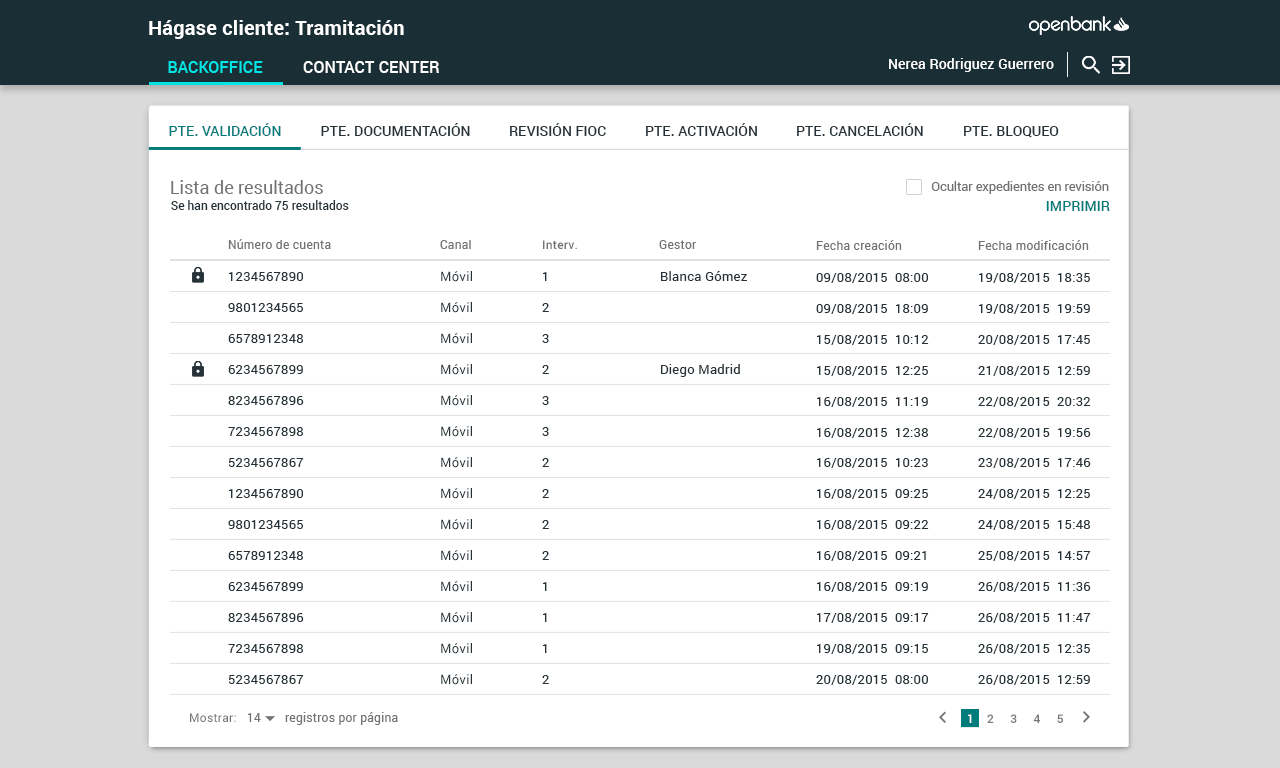
<style>
.page{position:relative;width:1280px;height:768px;background:#ffffff}
.page>*{position:absolute;margin:0}
.t1{font:20px "Roboto-Bold";letter-spacing:0.01em;color:#ffffff}
.t2{font:16px "Roboto-Medium";letter-spacing:0.01em;color:#00e6e6}
.t3{font:16px "Roboto-Medium";letter-spacing:0.01em;color:#ffffff}
.t4{font:14px "Roboto-Medium";letter-spacing:0.01em;color:#ffffff}
.t5{font:14px "Roboto-Medium";letter-spacing:0.01em;color:#007c7b}
.t6{font:14px "Roboto-Medium";letter-spacing:0.01em;color:#263238}
.t7{font:18px "Roboto-Regular";color:#727272}
.t8{font:13px "Roboto-Regular";color:#727272}
.t9{font:12px "Roboto-Medium";color:#263238}
.t10{font:14.2px "Roboto-Medium";letter-spacing:0.01em;color:#007c7b}
.t11{font:12px "Roboto-Regular";letter-spacing:0.02em;color:#727272}
.t12{font:12px "Roboto-Medium";letter-spacing:0.02em;color:#727272}
.t13{font:13px/31px "Roboto-Regular";letter-spacing:0.02em;color:#263238}
.t14{font:13px/30.9px "Roboto-Regular";letter-spacing:0.02em;color:#263238}
.t15{font:12.1px "Roboto-Regular";letter-spacing:0.02em;color:#727272}
.t16{font:12.1px "Roboto-Medium";letter-spacing:0.02em;color:#76777a}
.t17{font:12.1px "Roboto-Medium";letter-spacing:0.02em;color:#ffffff}
</style>
<div class="page">
<p class="t1" style="left:149px;top:20px;width:255px;height:19px">Hágase cliente: Tramitación</p>
<p class="t2" style="left:168px;top:61px;width:95px;height:12px">BACKOFFICE</p>
<p class="t3" style="left:303px;top:61px;width:136px;height:12px">CONTACT CENTER</p>
<p class="t4" style="left:889px;top:58px;width:165px;height:14px">Nerea Rodriguez Guerrero</p>
<p class="t5" style="left:169px;top:123px;width:112px;height:13px">PTE. VALIDACIÓN</p>
<p class="t6" style="left:321px;top:123px;width:149px;height:13px">PTE. DOCUMENTACIÓN</p>
<p class="t6" style="left:510px;top:123px;width:96px;height:13px">REVISIÓN FIOC</p>
<p class="t6" style="left:646px;top:123px;width:111px;height:13px">PTE. ACTIVACIÓN</p>
<p class="t6" style="left:797px;top:123px;width:126px;height:13px">PTE. CANCELACIÓN</p>
<p class="t6" style="left:964px;top:126px;width:95px;height:12px">PTE. BLOQUEO</p>
<p class="t7" style="left:171px;top:180px;width:152px;height:14px">Lista de resultados</p>
<p class="t8" style="left:931px;top:181px;width:178px;height:13px">Ocultar expedientes en revisión</p>
<p class="t9" style="left:171px;top:200px;width:178px;height:10px">Se han encontrado 75 resultados</p>
<p class="t10" style="left:1046px;top:201px;width:64px;height:10px">IMPRIMIR</p>
<p class="t11" style="left:228px;top:239px;width:103px;height:10px">Número de cuenta</p>
<p class="t11" style="left:440px;top:240px;width:31px;height:9px">Canal</p>
<p class="t12" style="left:543px;top:240px;width:34px;height:9px">Interv.</p>
<p class="t11" style="left:659px;top:240px;width:38px;height:9px">Gestor</p>
<p class="t11" style="left:816px;top:240px;width:86px;height:10px">Fecha creación</p>
<p class="t11" style="left:978px;top:240px;width:111px;height:10px">Fecha modificación</p>
<p class="t13" style="left:228px;top:272px;width:76px;height:412px">1234567890<br>9801234565<br>6578912348<br>6234567899<br>8234567896<br>7234567898<br>5234567867<br>1234567890<br>9801234565<br>6578912348<br>6234567899<br>8234567896<br>7234567898<br>5234567867</p>
<p class="t13" style="left:441px;top:271px;width:31px;height:414px">Móvil<br>Móvil<br>Móvil<br>Móvil<br>Móvil<br>Móvil<br>Móvil<br>Móvil<br>Móvil<br>Móvil<br>Móvil<br>Móvil<br>Móvil<br>Móvil</p>
<p class="t13" style="left:542px;top:272px;width:7px;height:412px">1<br>2<br>3<br>2<br>3<br>3<br>2<br>2<br>2<br>2<br>1<br>1<br>1<br>2</p>
<p class="t13" style="left:661px;top:271px;width:86px;height:106px">Blanca Gómez<br><br><br>Diego Madrid</p>
<p class="t14" style="left:816px;top:273px;width:113px;height:412px">09/08/2015  08:00<br>09/08/2015  18:09<br>15/08/2015  10:12<br>15/08/2015  12:25<br>16/08/2015  11:19<br>16/08/2015  12:38<br>16/08/2015  10:23<br>16/08/2015  09:25<br>16/08/2015  09:22<br>16/08/2015  09:21<br>16/08/2015  09:19<br>17/08/2015  09:17<br>19/08/2015  09:15<br>20/08/2015  08:00</p>
<p class="t14" style="left:978px;top:273px;width:113px;height:412px">19/08/2015  18:35<br>19/08/2015  19:59<br>20/08/2015  17:45<br>21/08/2015  12:59<br>22/08/2015  20:32<br>22/08/2015  19:56<br>23/08/2015  17:46<br>24/08/2015  12:25<br>24/08/2015  15:48<br>25/08/2015  14:57<br>26/08/2015  11:36<br>26/08/2015  11:47<br>26/08/2015  12:35<br>26/08/2015  12:59</p>
<p class="t15" style="left:190px;top:713px;width:46px;height:9px">Mostrar:</p>
<p class="t11" style="left:248px;top:713px;width:13px;height:9px">14</p>
<p class="t15" style="left:285px;top:712px;width:113px;height:13px">registros por página</p>
<p class="t16" style="left:968px;top:714px;width:95px;height:9px"><span class="t17">1   </span> 2     3     4     5</p>
</div>
